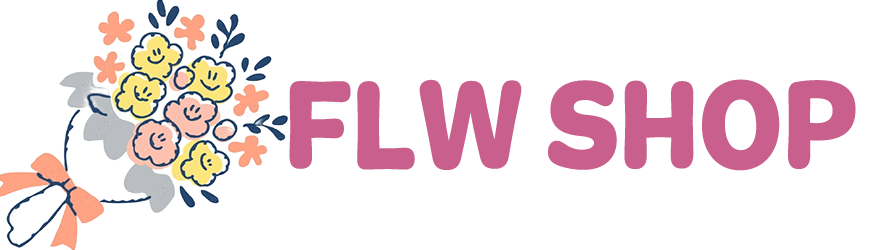
<style>
.page{position:relative;width:880px;height:250px;background:#ffffff}
.page>*{position:absolute;margin:0}
.t1{font:132px "Marigny-Bold";color:#c95f8c;scale:0.82 1}
</style>
<div class="page">
<p class="t1" style="left:289px;top:79px;width:567px;height:92px">FLW SHOP</p>
</div>
